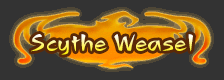
<style>
.page{position:relative;width:224px;height:80px;background:#333333}
.page>*{position:absolute;margin:0}
.t1{font:24px "FOT-PopFury-Std-B-vL2";scale:1.05 1}
</style>
<div class="page">
<p class="t1" style="left:31px;top:34px;width:162px;height:21px">Scythe Weasel</p>
</div>
